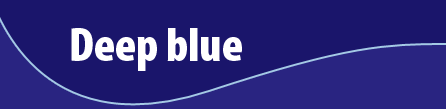
<style>
.page{position:relative;width:446px;height:109px;background:#1a156b}
.page>*{position:absolute;margin:0}
.t1{font:48px "MyriadPro-BlackCond";color:#ffffff}
</style>
<div class="page">
<p class="t1" style="left:71px;top:28px;width:171px;height:43px">Deep blue</p>
</div>
